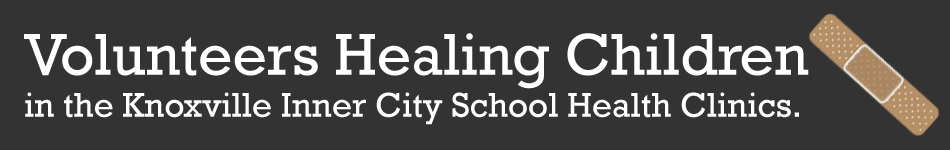
<style>
.page{position:relative;width:950px;height:150px;background:#333333}
.page>*{position:absolute;margin:0}
.t1{font:35px "Rockwell";color:#ffffff}
.t2{font:60px "Rockwell";color:#ffffff}
</style>
<div class="page">
<p class="t1" style="left:24px;top:33px;width:785px;height:92px"><span class="t2">Volunteers Healing Children <br></span>in the Knoxville Inner City School Health Clinics.</p>
</div>
